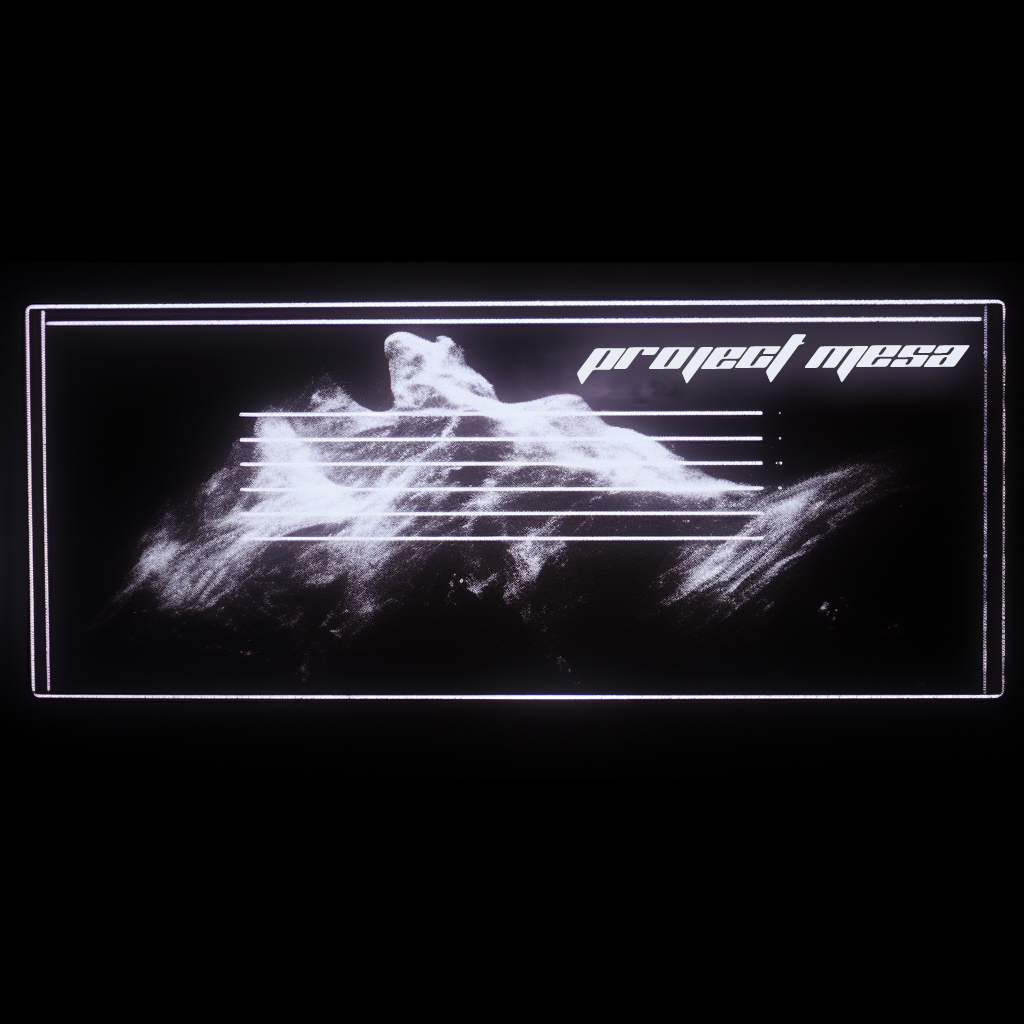
<style>
.page{position:relative;width:1024px;height:1024px;background:#000000}
.page>*{position:absolute;margin:0}
.t1{font:40.9px "PlanetKosmos";letter-spacing:0.02em;color:#e3ebfb;font-style:italic}
</style>
<div class="page">
<p class="t1" style="left:577px;top:334px;width:393px;height:51px">PROJECT MESA</p>
</div>
